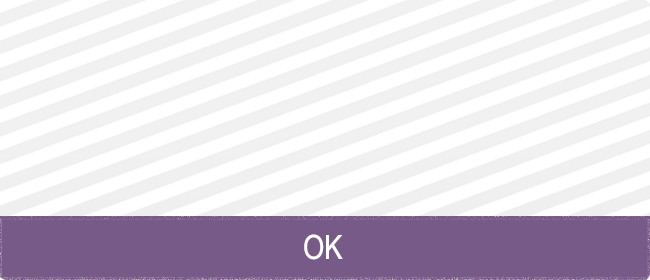
<style>
.page{position:relative;width:650px;height:280px;background:#ffffff}
.page>*{position:absolute;margin:0}
.t1{font:33.3px "ArialNarrow";color:#ffffff}
</style>
<div class="page">
<p class="t1" style="left:304px;top:234px;width:39px;height:26px">OK</p>
</div>
